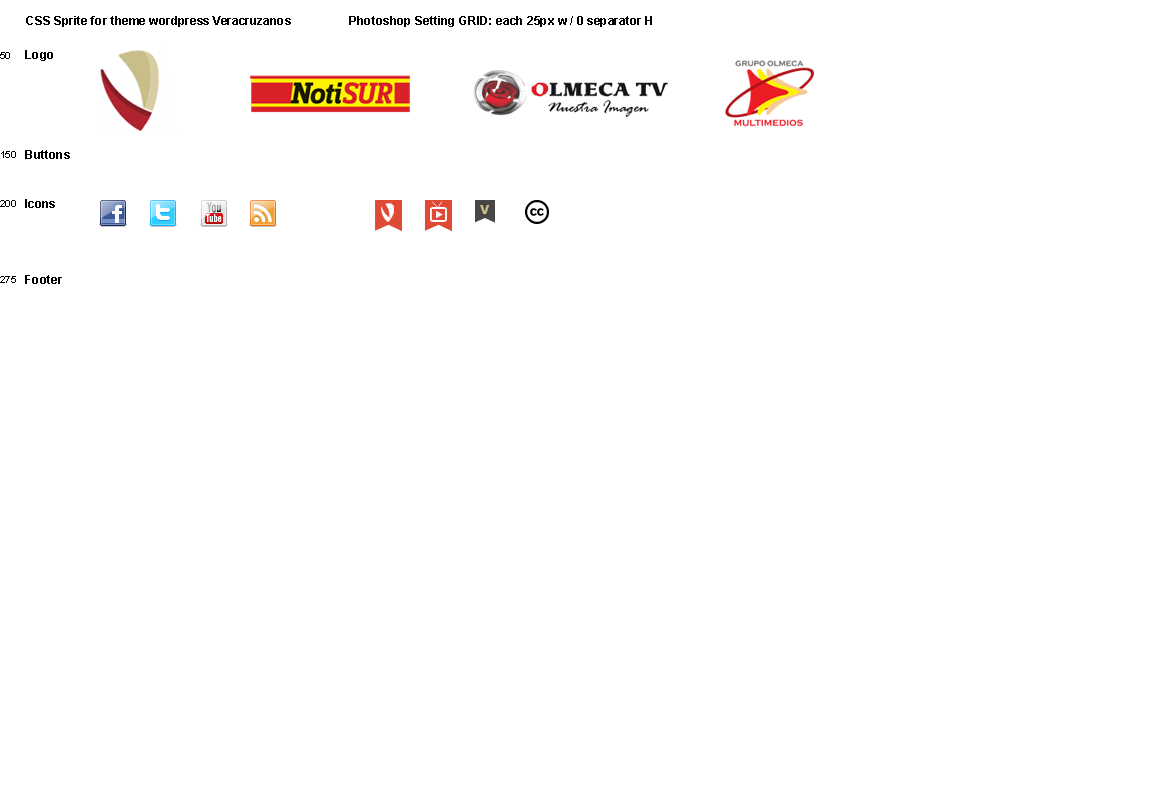
<style>
.page{position:relative;width:1170px;height:800px;background:#ffffff}
.page>*{position:absolute;margin:0}
.t1{font:12px "Arial-BoldMT";color:#000000}
.t2{font:10px "ArialMT";color:#000000}
.t3{font:12px "Arial-Black";color:#c7be89;text-transform:uppercase}
</style>
<div class="page">
<p class="t1" style="left:26px;top:16px;width:265px;height:11px">CSS Sprite for theme wordpress Veracruzanos</p>
<p class="t1" style="left:349px;top:16px;width:303px;height:11px">Photoshop Setting GRID: each 25px w / 0 separator H</p>
<p class="t2" style="left:0px;top:52px;width:10px;height:7px">50</p>
<p class="t1" style="left:25px;top:50px;width:28px;height:11px">Logo</p>
<p class="t1" style="left:25px;top:150px;width:45px;height:9px">Buttons</p>
<p class="t2" style="left:1px;top:151px;width:15px;height:7px">150</p>
<p class="t2" style="left:0px;top:200px;width:16px;height:7px">200</p>
<p class="t1" style="left:25px;top:199px;width:30px;height:9px">Icons</p>
<p class="t3" style="left:480px;top:205px;width:10px;height:9px">V</p>
<p class="t2" style="left:0px;top:276px;width:16px;height:7px">275</p>
<p class="t1" style="left:25px;top:275px;width:37px;height:9px">Footer</p>
</div>
